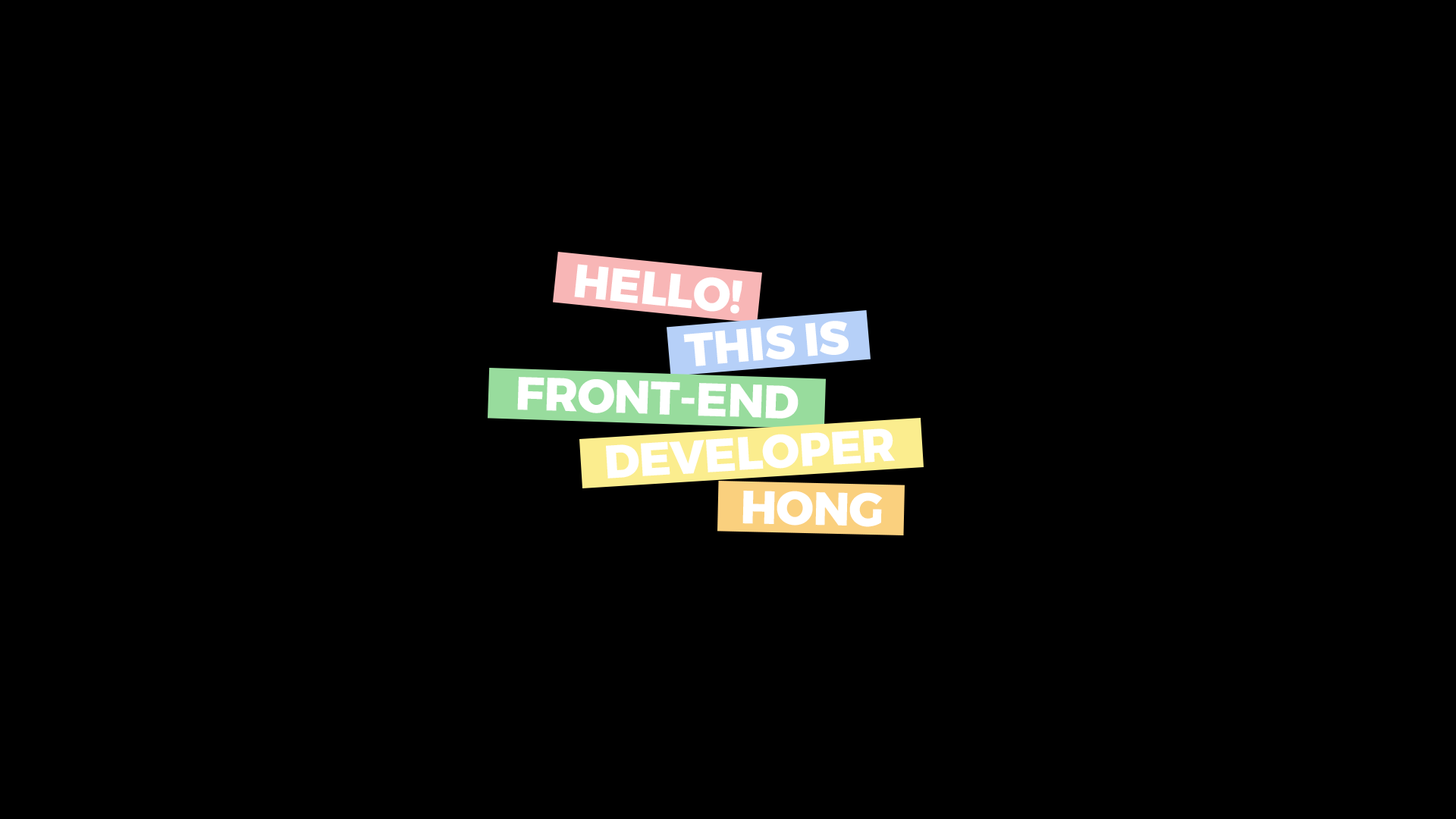
<style>
.page{position:relative;width:1456px;height:819px;background:#000000}
.page>*{position:absolute;margin:0}
.t1{font:46.6px "Montserrat-ExtraBold";letter-spacing:-0.01em;color:#ffffff}
</style>
<div class="page">
<p class="t1" style="left:574px;top:264px;width:168px;height:50px;rotate:6deg">HELLO!</p>
<p class="t1" style="left:683px;top:321px;width:166px;height:45px;rotate:-5deg">THIS IS</p>
<p class="t1" style="left:517px;top:377px;width:282px;height:42px;rotate:2deg">FRONT-END</p>
<p class="t1" style="left:606px;top:428px;width:290px;height:51px;rotate:-4deg">DEVELOPER</p>
<p class="t1" style="left:742px;top:491px;width:141px;height:36px;rotate:1deg">HONG</p>
</div>
